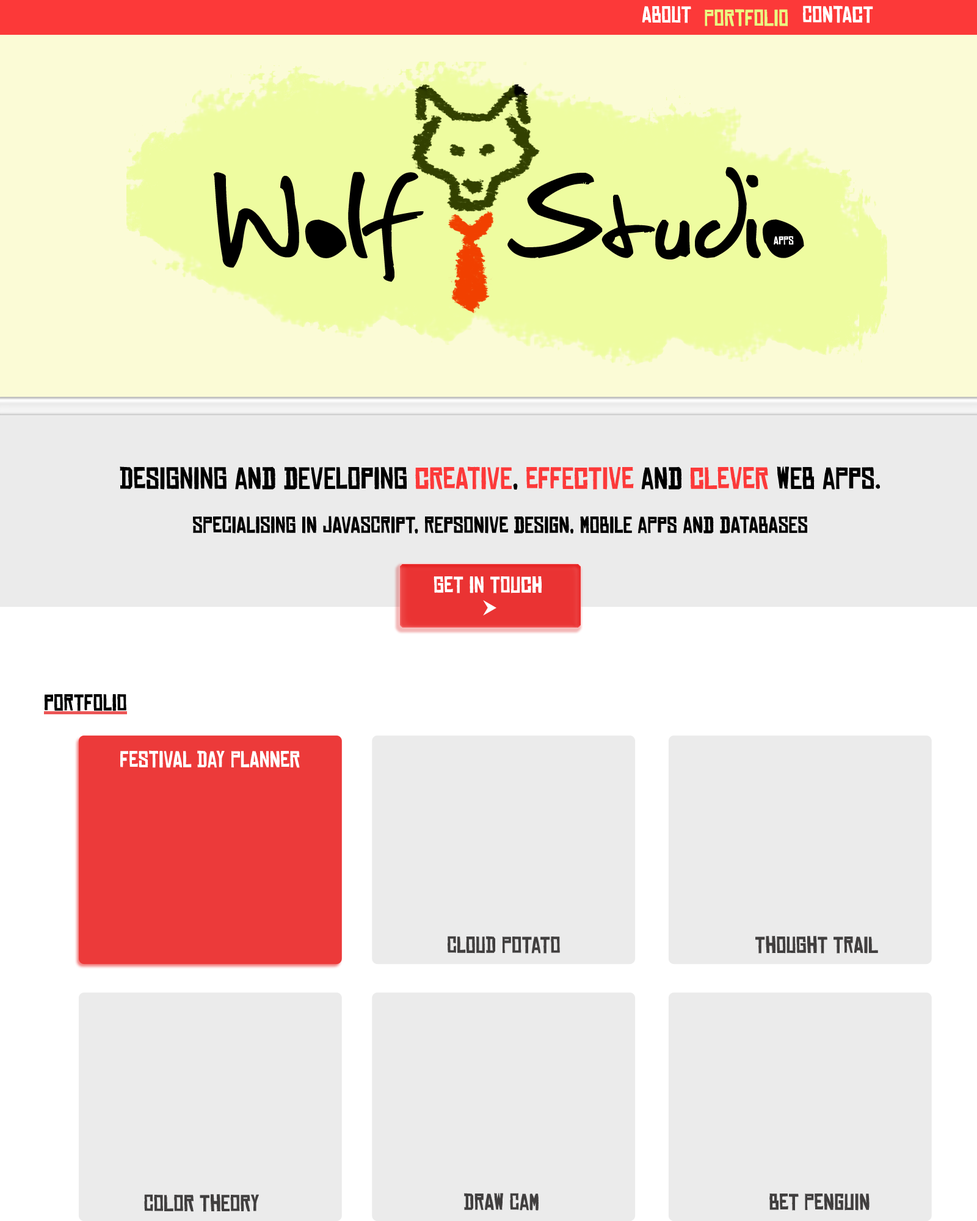
<style>
.page{position:relative;width:977px;height:1221px;background:#ebebeb}
.page>*{position:absolute;margin:0}
.t1{font:22px "ChineseRocksRg-Regular";letter-spacing:0.01em;color:#ffffff}
.t2{font:22px "ChineseRocksRg-Regular";letter-spacing:0.01em;color:#ebfa82}
.t3{font:22px/44px "ChineseRocksRg-Regular";letter-spacing:0.01em;color:#000000}
.t4{font:29.3px/44px "ChineseRocksRg-Regular";letter-spacing:0.01em;color:#000000}
.t5{font:29.3px/44px "ChineseRocksRg-Regular";letter-spacing:0.01em;color:#fc3939}
.t6{font:22px "ChineseRocksRg-Regular";letter-spacing:0.01em;color:#000000}
.t7{font:22px "ChineseRocksRg-Regular";letter-spacing:0.01em;color:#413f3f}
</style>
<div class="page">
<p class="t1" style="left:803px;top:5px;width:70px;height:18px">CONTACT</p>
<p class="t1" style="left:642px;top:6px;width:49px;height:17px">ABOUT</p>
<p class="t2" style="left:704px;top:9px;width:84px;height:17px">PORTFOLIO</p>
<p class="t3" style="left:120px;top:466px;width:760px;height:68px;text-align:center"><span class="t4">Designing and developing </span><span class="t5">creative</span><span class="t4">, </span><span class="t5">effective</span><span class="t4"> and </span><span class="t5">clever</span><span class="t4"> web apps.<br></span>specialising in javascript, repsonive design, mobile apps and databases</p>
<p class="t1" style="left:433px;top:576px;width:108px;height:17px">Get In Touch</p>
<p class="t6" style="left:45px;top:694px;width:81px;height:17px">portfolio</p>
<p class="t1" style="left:120px;top:750px;width:180px;height:18px">Festival Day PLanner</p>
<p class="t7" style="left:447px;top:936px;width:113px;height:18px">Cloud Potato</p>
<p class="t7" style="left:755px;top:936px;width:123px;height:18px">Thought Trail</p>
<p class="t7" style="left:464px;top:1193px;width:74px;height:17px">Draw Cam</p>
<p class="t7" style="left:769px;top:1193px;width:100px;height:17px">Bet Penguin</p>
<p class="t7" style="left:144px;top:1194px;width:115px;height:18px">Color Theory</p>
</div>
